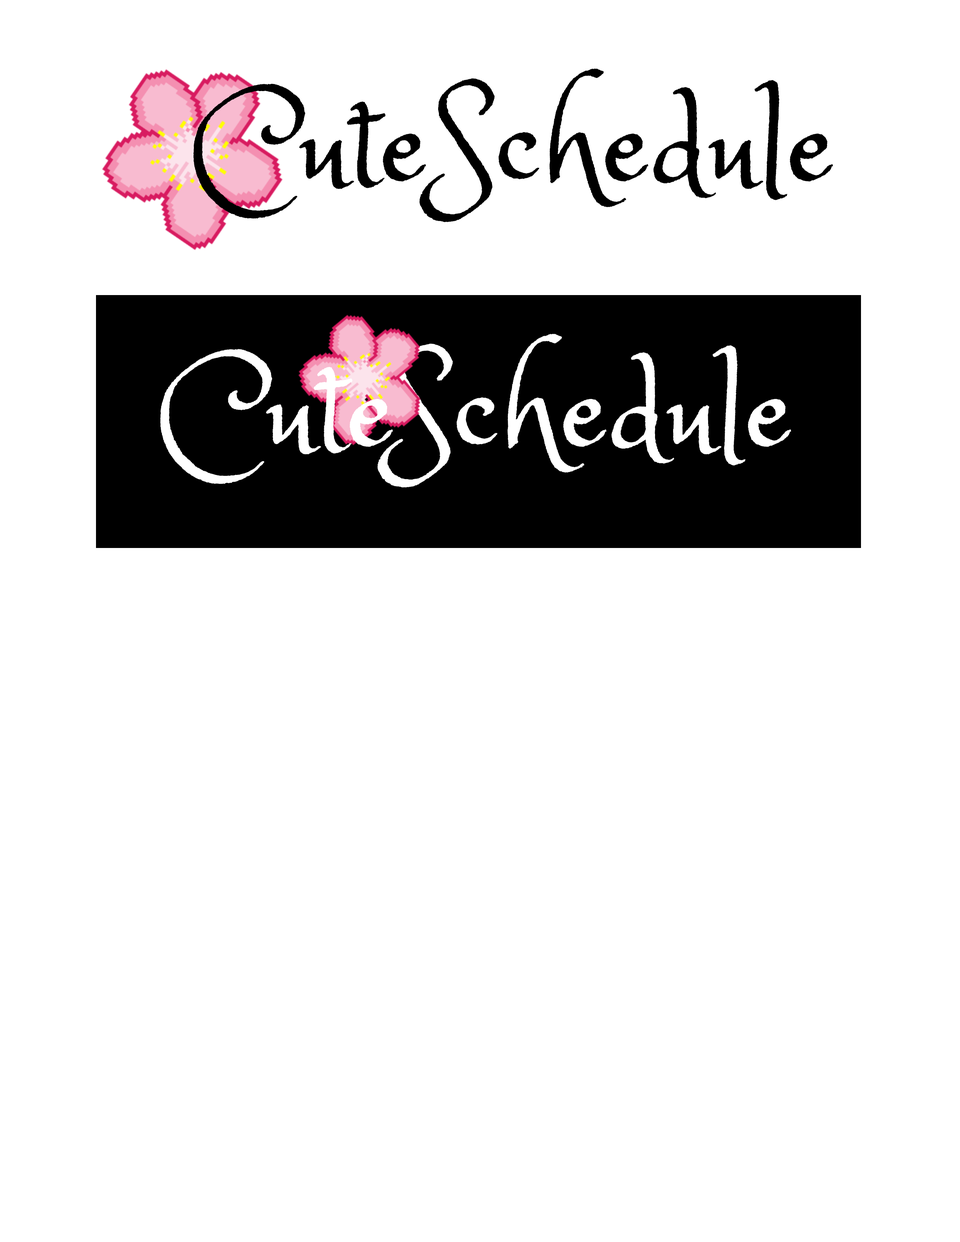
<style>
.page{position:relative;width:960px;height:1242px;background:#ffffff}
.page>*{position:absolute;margin:0}
.t1{font:131.8px "PrincessSofia";color:#000000}
.t2{font:131.8px "PrincessSofia";color:#ffffff}
</style>
<div class="page">
<p class="t1" style="left:193px;top:69px;width:640px;height:153px">CuteSchedule</p>
<p class="t2" style="left:377px;top:334px;width:414px;height:153px">Schedule</p>
<p class="t2" style="left:160px;top:349px;width:233px;height:135px">Cute</p>
</div>
